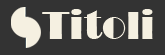
<style>
.page{position:relative;width:165px;height:55px;background:#333333}
.page>*{position:absolute;margin:0}
.t1{font:40.4px "Broadway";color:#f5f0e1}
.t2{font:40.4px "MyriadPro-Regular";color:#f5f0e1}
</style>
<div class="page">
<p class="t1" style="left:42px;top:9px;width:111px;height:30px"><span class="t2"><br></span>Titoli</p>
</div>
